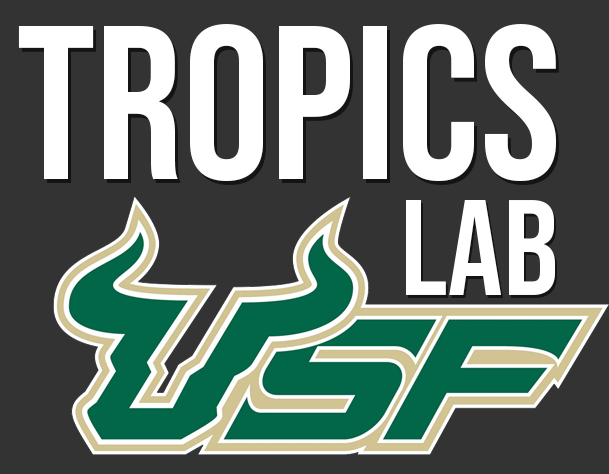
<style>
.page{position:relative;width:609px;height:474px;background:#333333}
.page>*{position:absolute;margin:0}
.t1{font:218.1px "BebasNeue-Regular";color:#ffffff}
.t2{font:136.2px "BebasNeue-Regular";color:#ffffff}
</style>
<div class="page">
<p class="t1" style="left:18px;top:24px;width:538px;height:157px">TROPICS</p>
<p class="t2" style="left:406px;top:200px;width:149px;height:95px">LAB</p>
</div>
